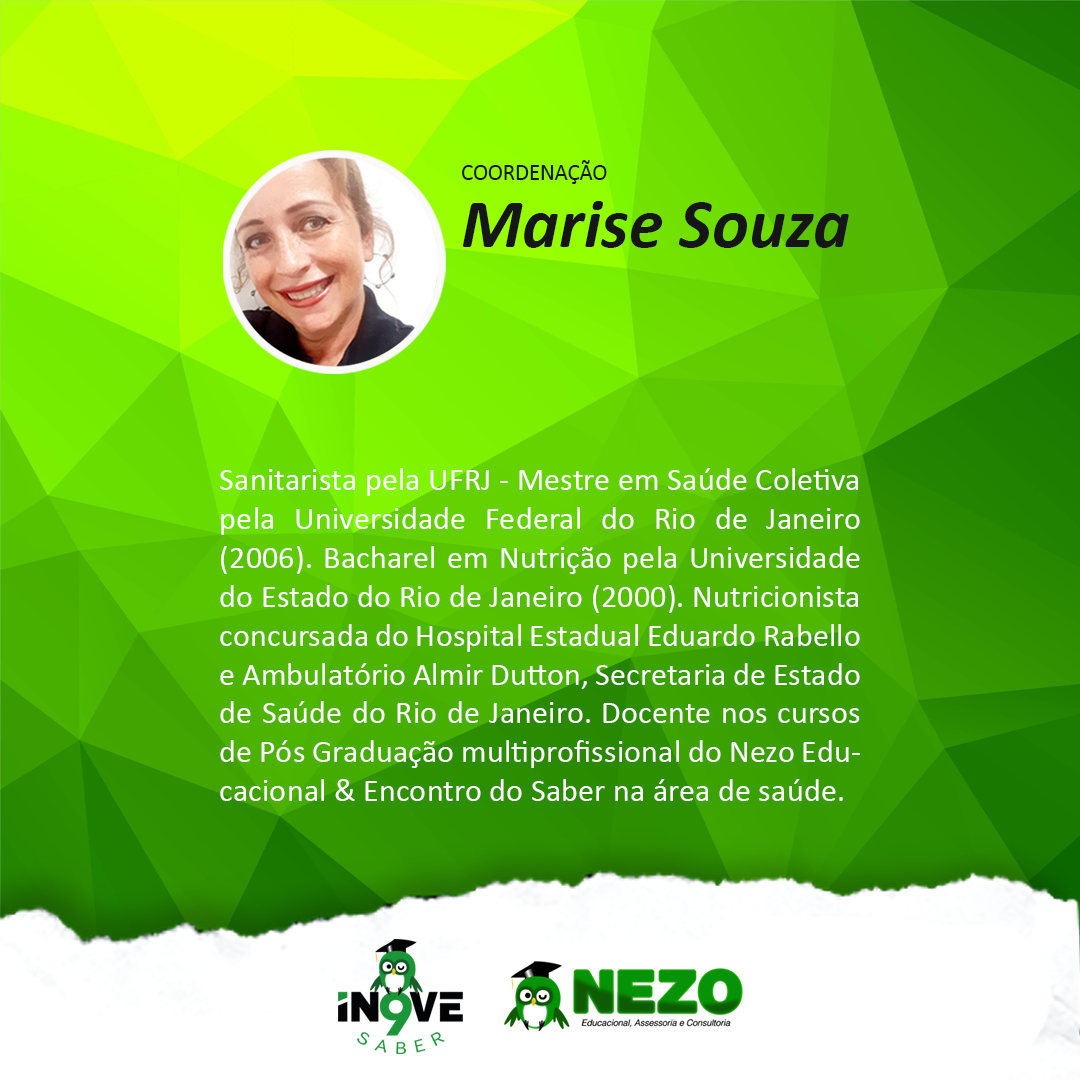
<style>
.page{position:relative;width:1080px;height:1080px}
.page>*{position:absolute;margin:0}
.t1{font:32.4px "Calibri";color:#fcfcfc}
.t2{font:22.6px/44.5px "Calibri-BoldItalic";color:#fcfcfc}
.t3{font:22.6px/35.4px "Calibri";color:#161616}
.t4{font:70.2px/66.5px "Calibri-BoldItalic";color:#161616}
.t5{font:32.4px/44.3px "Calibri";color:#fcfcfc}
</style>
<div class="page">
<p class="t1" style="left:220px;top:160px;width:640px;height:641px"><span class="t2"><br></span><span class="t3">COORDENAÇÃO<br></span><span class="t4">Marise Souza<br><br><br><br></span><span class="t5">Sanitarista pela UFRJ - Mestre em Saúde Coletiva </span>pela Universidade Federal do Rio de Janeiro (2006). Bacharel em Nutrição pela Universidade do Estado do Rio de Janeiro (2000). Nutricionista concursada do Hospital Estadual Eduardo Rabello e Ambulatório Almir Dutton, Secretaria de Estado de Saúde do Rio de Janeiro. Docente nos cursos de Pós Graduação multiprofissional do Nezo Educacional &amp; Encontro do Saber na área de saúde.</p>
</div>
